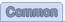
<style>
.page{position:relative;width:65px;height:22px;background:#d2ddf1}
.page>*{position:absolute;margin:0}
.t1{font:12px "ArialMT";color:#949494;font-weight:bold}
</style>
<div class="page">
<p class="t1" style="left:6px;top:7px;width:51px;height:10px">Common</p>
</div>
